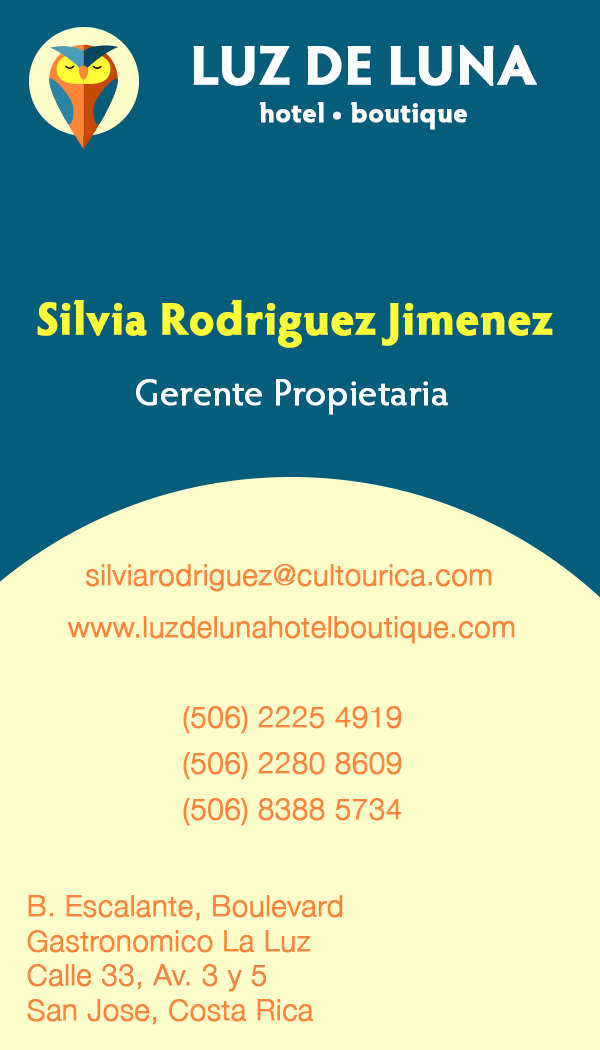
<style>
.page{position:relative;width:600px;height:1050px;background:#ffffcc}
.page>*{position:absolute;margin:0}
.t1{font:54.9px "HypatiaSansPro-Bold";color:#ffffff;font-weight:bold}
.t2{font:27.4px "HypatiaSansPro-Bold";color:#ffffff;font-weight:bold}
.t3{font:45.8px "HypatiaSansPro-Bold";color:#ffff39;font-weight:bold}
.t4{font:37.5px "HypatiaSansPro-Regular";color:#ffffff;font-weight:bold}
.t5{font:29.2px "HelveticaNeue-Light";color:#ff8539;font-weight:bold}
.t6{font:29.2px/4.2px "HelveticaNeue-Light";color:#ff8539;font-weight:bold}
.t7{font:29.2px "HelveticaNeue-Light";color:#f28540;font-weight:bold}
</style>
<div class="page">
<p class="t1" style="left:193px;top:45px;width:344px;height:41px">LUZ DE LUNA</p>
<p class="t2" style="left:259px;top:102px;width:208px;height:28px">hotel • boutique</p>
<p class="t3" style="left:37px;top:300px;width:516px;height:48px">Silvia Rodriguez Jimenez</p>
<p class="t4" style="left:136px;top:379px;width:312px;height:36px">Gerente Propietaria</p>
<p class="t5" style="left:85px;top:564px;width:407px;height:28px">silviarodriguez@cultourica.com</p>
<p class="t5" style="left:67px;top:616px;width:448px;height:28px">www.luzdelunahotelboutique.com</p>
<p class="t6" style="left:183px;top:706px;width:219px;height:120px">(506) 2225 4919 <br>(506) 2280 8609<br>(506) 8388 5734</p>
<p class="t5" style="left:27px;top:895px;width:316px;height:58px">B. Escalante, Boulevard Gastronomico La Luz</p>
<p class="t7" style="left:27px;top:964px;width:240px;height:28px">Calle 33, Av. 3 y 5</p>
<p class="t5" style="left:27px;top:999px;width:287px;height:26px">San Jose, Costa Rica</p>
</div>
